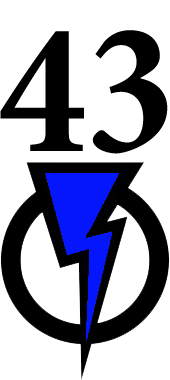
<style>
.page{position:relative;width:170px;height:380px;background:#ffffff}
.page>*{position:absolute;margin:0}
.t1{font:190px "MinionPro-BoldCn";color:#000000}
</style>
<div class="page">
<p class="t1" style="left:0px;top:30px;width:168px;height:124px">43</p>
</div>
